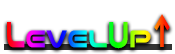
<style>
.page{position:relative;width:175px;height:54px;background:#ffffff}
.page>*{position:absolute;margin:0}
.t1{font:28.6px "NicoKaku"}
.t2{font:42.9px "NicoKaku";scale:0.67 1}
</style>
<div class="page">
<p class="t1" style="left:7px;top:14px;width:163px;height:35px"><span class="t2">L</span>EVEL<span class="t2">U</span>P<span class="t2">↑</span></p>
</div>
